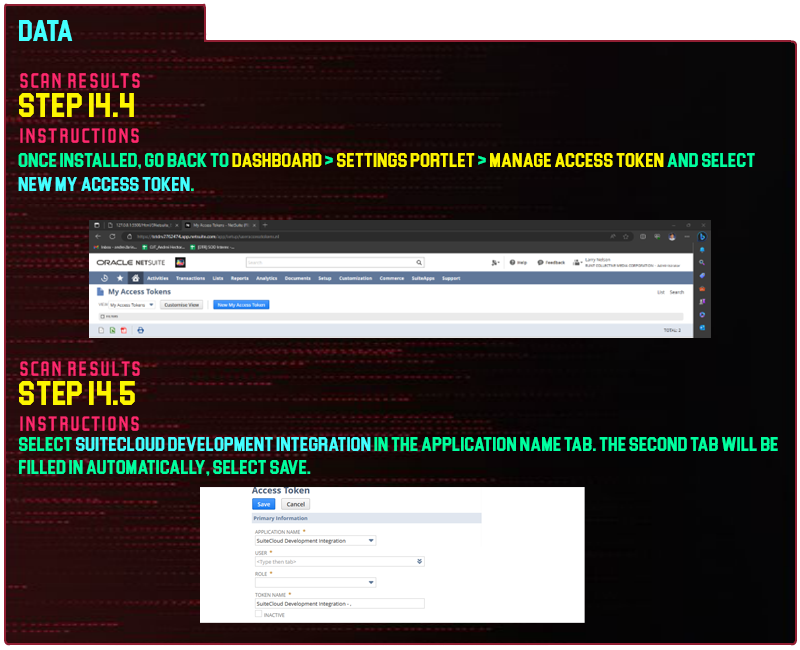
<style>
.page{position:relative;width:800px;height:650px}
.page>*{position:absolute;margin:0}
.t1{font:30px "Blockletter";color:#43ffff}
.t2{font:35px "Party-Lights-[WLM]-Flat";color:#ff296d}
.t3{font:35px "Blockletter";color:#fdf500}
.t4{font:20px "Blockletter";color:#00ff9f}
.t5{font:20px "Blockletter";color:#fdf500}
.t6{font:20px "Blockletter";color:#43ffff}
.t7{font:34.9px "Party-Lights-[WLM]-Flat";color:#ff296d}
.t8{font:34.8px "Blockletter";color:#fdf500}
.t9{font:34.8px "Party-Lights-[WLM]-Flat";color:#ff296d}
.t10{font:19.9px "Blockletter";color:#00ff9f}
.t11{font:19.9px "Blockletter";color:#43ffff}
</style>
<div class="page">
<p class="t1" style="left:19px;top:20px;width:54px;height:21px">Data</p>
<p class="t2" style="left:20px;top:73px;width:120px;height:15px">Scan REsults</p>
<p class="t3" style="left:19px;top:93px;width:115px;height:24px">Step 14.4</p>
<p class="t2" style="left:20px;top:128px;width:119px;height:15px">instructions</p>
<p class="t4" style="left:18px;top:153px;width:737px;height:38px">once installed, go back to <span class="t5">dashboard</span> &gt; <span class="t5">settings portlet</span> &gt; <span class="t5">Manage access token</span> and select <span class="t6">new my access token</span>.</p>
<p class="t7" style="left:20px;top:361px;width:120px;height:15px">Scan REsults</p>
<p class="t8" style="left:19px;top:381px;width:116px;height:24px">Step 14.5</p>
<p class="t9" style="left:20px;top:416px;width:119px;height:15px">instructions</p>
<p class="t10" style="left:19px;top:437px;width:759px;height:39px">select <span class="t11">suitecloud development integration</span> in the application name tab. The second tab will be filled in automatically, select save.</p>
</div>
